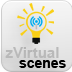
<style>
.page{position:relative;width:72px;height:72px}
.page>*{position:absolute;margin:0}
.t1{font:15px "Arial-BoldMT";color:#b9b9b9}
.t2{font:13.9px "Arial-BoldMT";color:#000000}
</style>
<div class="page">
<p class="t1" style="left:5px;top:47px;width:54px;height:11px">zVirtual</p>
<p class="t2" style="left:19px;top:60px;width:47px;height:8px">scenes</p>
</div>
